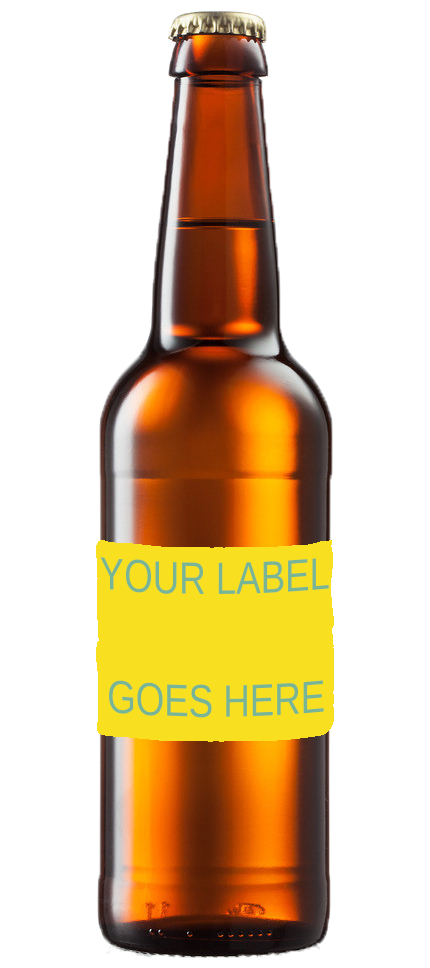
<style>
.page{position:relative;width:430px;height:968px;background:#ffffff}
.page>*{position:absolute;margin:0}
.t1{font:45.2px "LiberationSans";color:#78b496;scale:0.81 1}
</style>
<div class="page">
<p class="t1" style="left:100px;top:557px;width:229px;height:37px">YOUR LABEL</p>
<p class="t1" style="left:109px;top:680px;width:215px;height:38px">GOES HERE</p>
</div>
